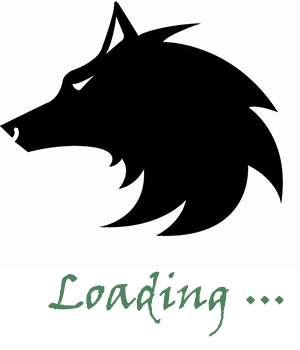
<style>
.page{position:relative;width:300px;height:350px;background:#fdfdfd}
.page>*{position:absolute;margin:0}
.t1{font:48px "VinerHandITC";color:#4e8560}
</style>
<div class="page">
<p class="t1" style="left:48px;top:271px;width:181px;height:66px">Loading</p>
<p class="t1" style="left:246px;top:296px;width:38px;height:9px">...</p>
</div>
